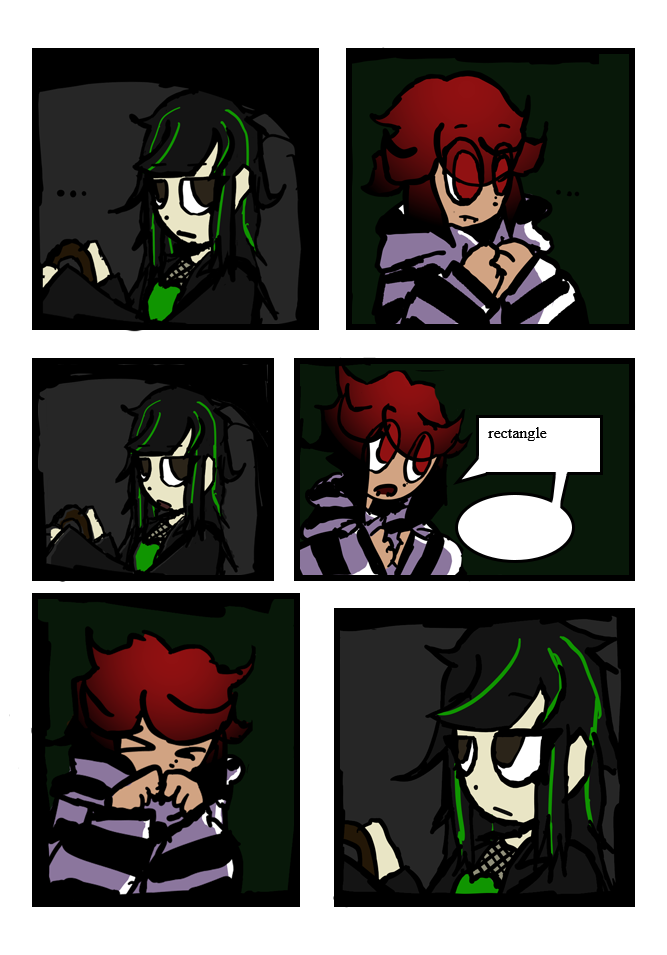
<style>
.page{position:relative;width:667px;height:955px;background:#ffffff}
.page>*{position:absolute;margin:0}
.t1{font:16px "TimesNewRomanPSMT";color:#000000}
</style>
<div class="page">
<p class="t1" style="left:488px;top:427px;width:59px;height:14px">rectangle</p>
</div>
